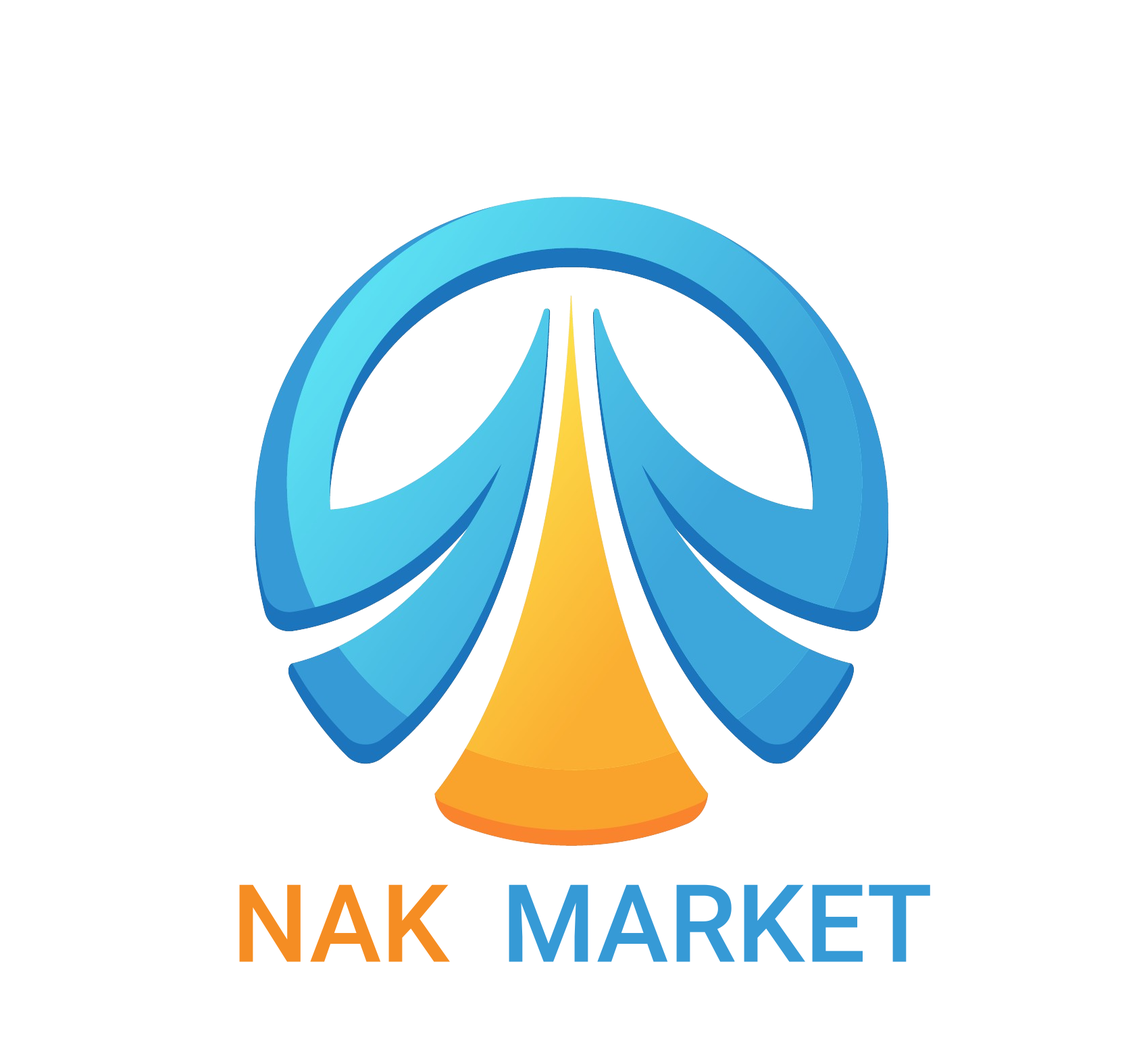
<style>
.page{position:relative;width:1143px;height:1043px;background:#ffffff}
.page>*{position:absolute;margin:0}
.t1{font:108.1px "Roboto-Medium";color:#f58d23}
.t2{font:108.1px "Roboto-Medium";color:#369ad6}
</style>
<div class="page">
<p class="t1" style="left:239px;top:885px;width:211px;height:77px">NAK</p>
<p class="t2" style="left:509px;top:885px;width:421px;height:77px">MARKET</p>
</div>
